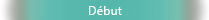
<style>
.page{position:relative;width:209px;height:20px}
.page>*{position:absolute;margin:0}
.t1{font:12.5px "LaoUI";color:#fefefe}
</style>
<div class="page">
<p class="t1" style="left:89px;top:6px;width:33px;height:9px">Début</p>
</div>
